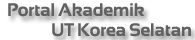
<style>
.page{position:relative;width:195px;height:40px;background:#ffffff}
.page>*{position:absolute;margin:0}
.t1{font:18px "Sansation-Bold";color:#616161}
</style>
<div class="page">
<p class="t1" style="left:8px;top:3px;width:137px;height:14px">Portal Akademik</p>
<p class="t1" style="left:52px;top:23px;width:139px;height:14px">UT Korea Selatan</p>
</div>
